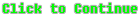
<style>
.page{position:relative;width:139px;height:15px;background:#ffffff}
.page>*{position:absolute;margin:0}
.t1{font:15.8px "FixedsysExcelsiorIIIb";color:#00ff00}
</style>
<div class="page">
<p class="t1" style="left:3px;top:3px;width:134px;height:10px">Click to Continue</p>
</div>
